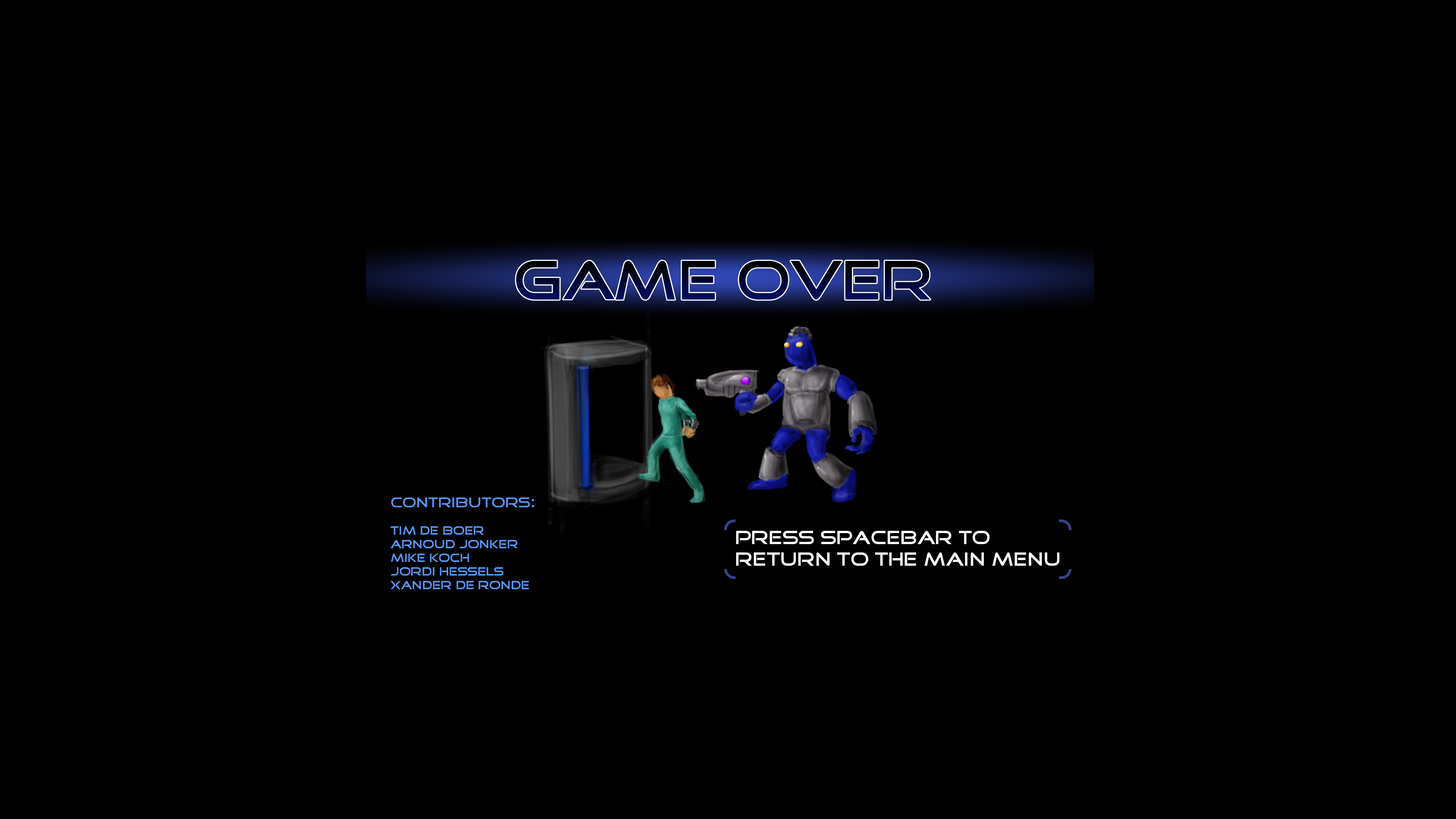
<style>
.page{position:relative;width:1456px;height:819px;background:#000000}
.page>*{position:absolute;margin:0}
.t1{font:53.1px "GoodTimes"}
.t2{font:11.4px "GoodTimes";color:#5797f8}
.t3{font:13.6px "GoodTimes";color:#5797f8}
.t4{font:18.2px "GoodTimes";color:#5797f8}
.t5{font:18.2px "GoodTimes";color:#ffffff}
</style>
<div class="page">
<p class="t1" style="left:516px;top:261px;width:414px;height:39px">GAME OVER</p>
<p class="t2" style="left:391px;top:497px;width:143px;height:92px"><span class="t3">Contributors</span><span class="t4">:<br></span><br>Tim de boer<br>arnoud jonker<br>mike koch<br>jordi hessels<br>xander de ronde</p>
<p class="t5" style="left:736px;top:531px;width:323px;height:35px">press spacebar to<br>return to the main menu</p>
</div>
